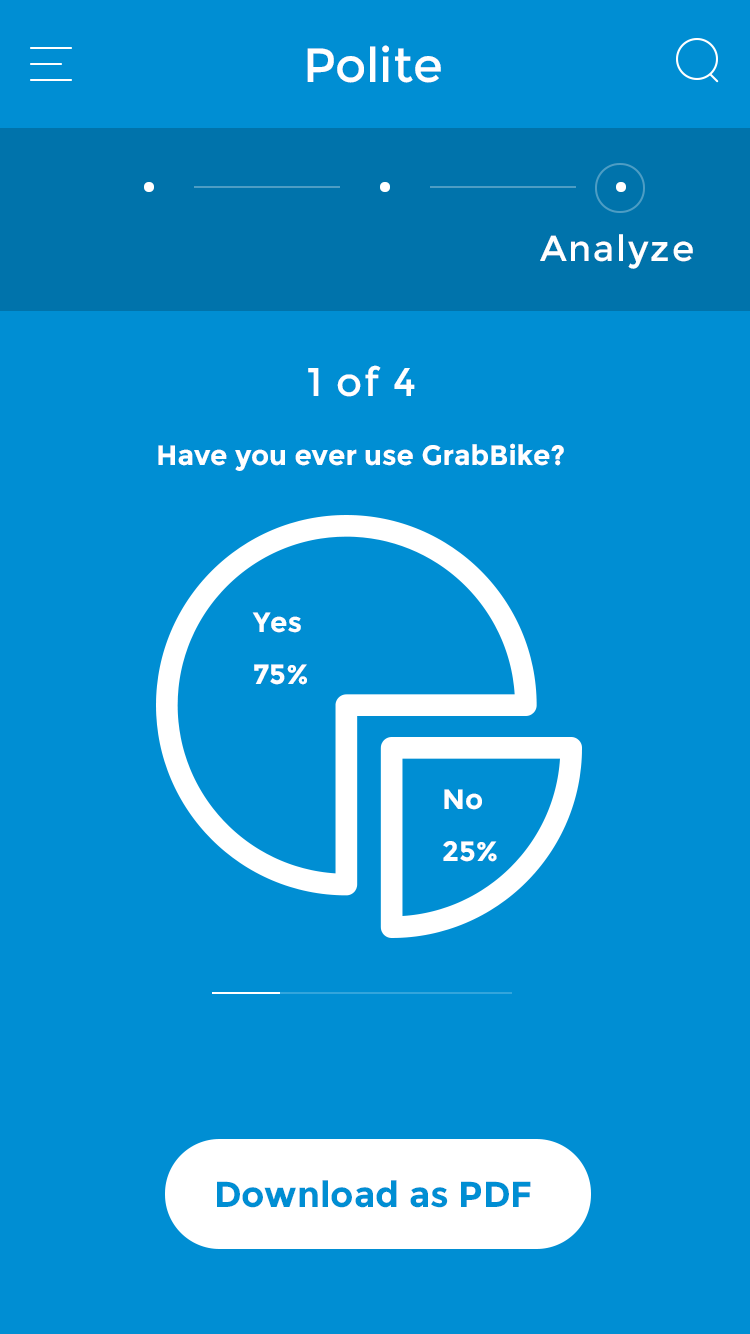
<style>
.page{position:relative;width:750px;height:1334px;background:#008ed3}
.page>*{position:absolute;margin:0}
.t1{font:48px "Montserrat-Regular";color:#ffffff}
.t2{font:36px "Montserrat-Regular";letter-spacing:0.05em;color:#ffffff}
.t3{font:40px "Montserrat-Regular";letter-spacing:0.04em;color:#ffffff}
.t4{font:28px "Montserrat-Bold";color:#ffffff}
.t5{font:28px/52px "Montserrat-Bold";color:#ffffff}
.t6{font:36px "Montserrat-Bold";color:#008ed3}
</style>
<div class="page">
<p class="t1" style="left:307px;top:45px;width:134px;height:38px">Polite</p>
<p class="t2" style="left:540px;top:234px;width:153px;height:35px">Analyze</p>
<p class="t3" style="left:308px;top:365px;width:107px;height:32px">1 of 4</p>
<p class="t4" style="left:158px;top:443px;width:406px;height:28px">Have you ever use GrabBike?</p>
<p class="t5" style="left:252px;top:612px;width:55px;height:73px">Yes<br>75%</p>
<p class="t5" style="left:443px;top:789px;width:54px;height:73px">No<br>25%</p>
<p class="t6" style="left:217px;top:1180px;width:314px;height:28px">Download as PDF</p>
</div>
